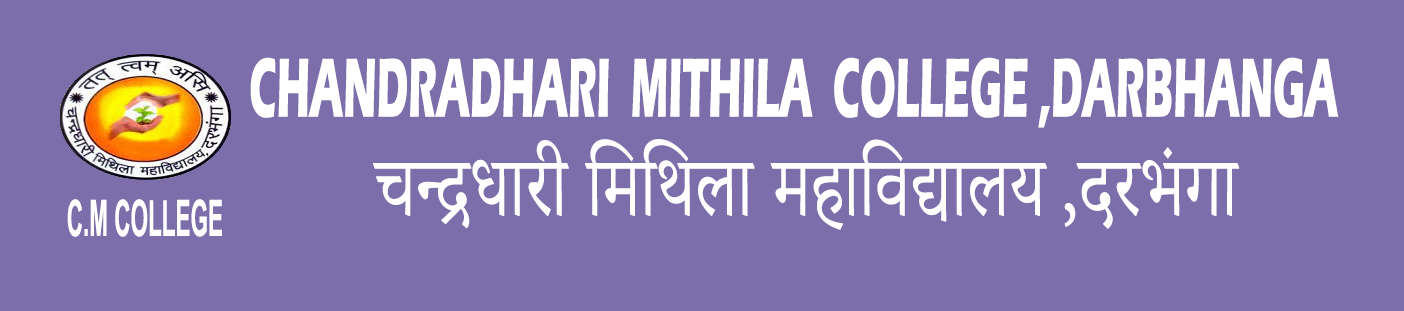
<style>
.page{position:relative;width:1404px;height:311px;background:#7c6eab}
.page>*{position:absolute;margin:0}
.t1{font:86.6px "ErasITC-Bold";color:#ffffff;scale:0.47 1}
.t2{font:104.8px "AdobeDevanagari-Regular";color:#ffffff;scale:0.76 1}
.t3{font:50.2px "Arial-BoldMT";color:#ffffff;scale:0.45 1}
</style>
<div class="page">
<p class="t1" style="left:250px;top:57px;width:1089px;height:71px">CHANDRADHARI  MITHILA  COLLEGE ,DARBHANGA</p>
<p class="t2" style="left:373px;top:139px;width:867px;height:91px">चन्द्रधारी मिथिला महाविद्यालय ,दरभंगा</p>
<p class="t3" style="left:67px;top:199px;width:155px;height:38px">C.M COLLEGE</p>
</div>
